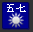
<style>
.page{position:relative;width:33px;height:32px;background:#000090}
.page>*{position:absolute;margin:0}
.t1{font:10.4px "SimSun";color:#ffffff}
</style>
<div class="page">
<p class="t1" style="left:7px;top:4px;width:19px;height:8px">五七</p>
</div>
